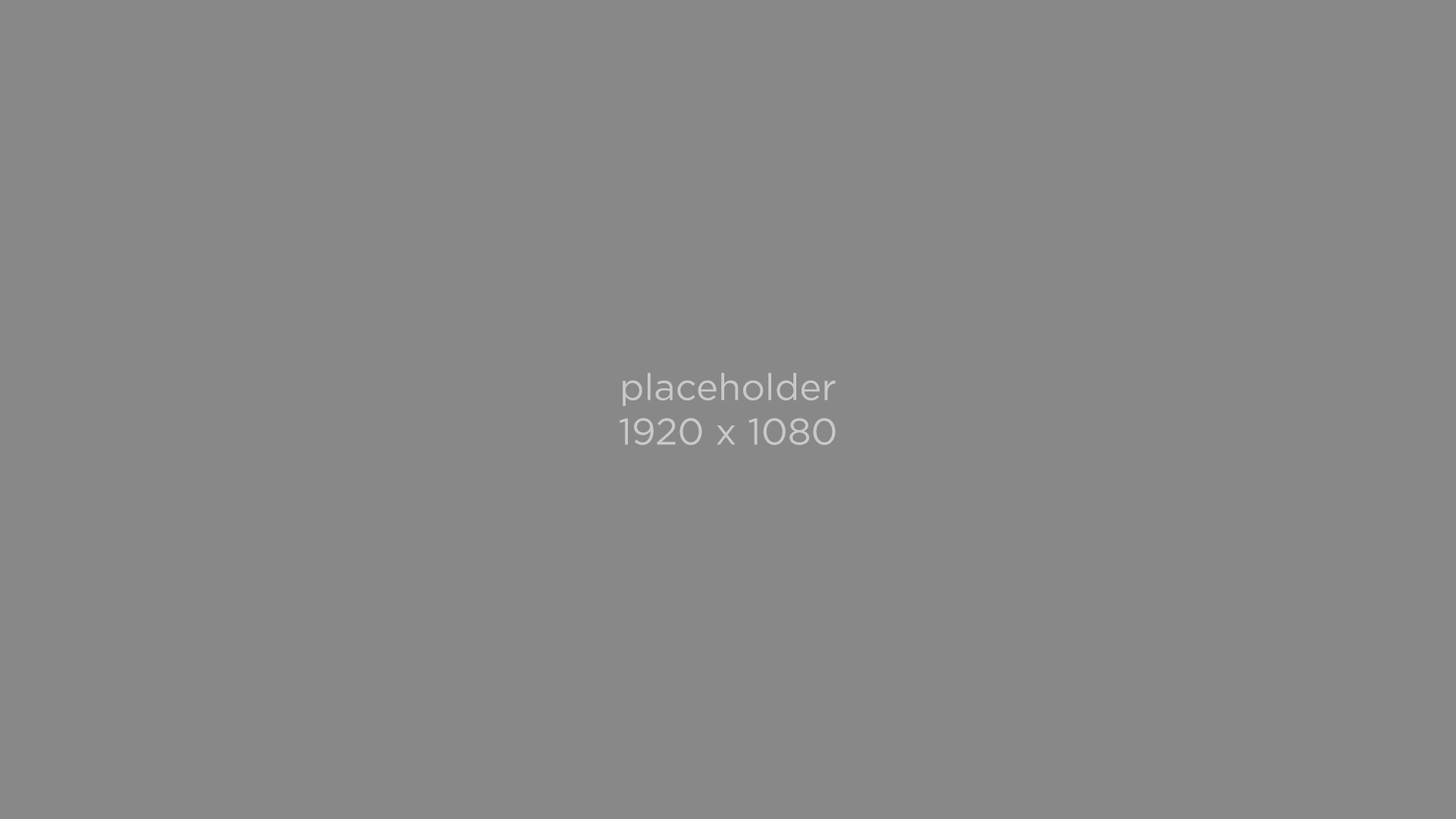
<style>
.page{position:relative;width:1456px;height:819px;background:#888888}
.page>*{position:absolute;margin:0}
.t1{font:37.2px "Gotham-Book";color:#c9c9c9}
</style>
<div class="page">
<p class="t1" style="left:619px;top:372px;width:217px;height:73px;text-align:center">placeholder<br>1920 x 1080</p>
</div>
